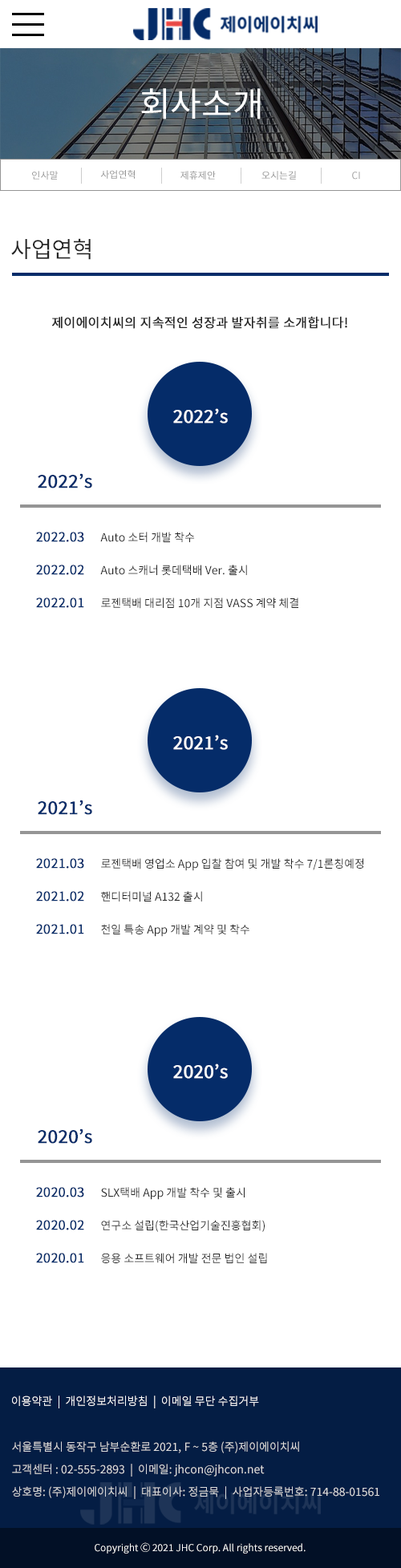
<style>
.page{position:relative;width:401px;height:1568px;background:#ffffff}
.page>*{position:absolute;margin:0}
.t1{font:33.7px "NotoSansKR-Regular";color:#ffffff}
.t2{font:9.6px "NotoSansKR-Regular";color:#959595}
.t3{font:22.5px "NotoSansKR-Regular";color:#242424}
.t4{font:12.8px "NotoSansKR-Regular";color:#242424;font-weight:bold}
.t5{font:17.6px "NotoSansKR-Regular";color:#ffffff;font-weight:bold}
.t6{font:17.6px "NotoSansKR-Regular";color:#052c69;font-weight:bold}
.t7{font:11.2px/32.9px "NotoSansKR-Regular";color:#242424}
.t8{font:12.8px/32.9px "NotoSansKR-Regular";color:#052c69;font-weight:bold}
.t9{font:11.2px "NotoSansKR-Regular";color:#ffffff}
.t10{font:11.2px/22.5px "NotoSansKR-Regular";color:#dddddd}
.t11{font:9.6px "NotoSansKR-Regular";color:#ffffff}
</style>
<div class="page">
<p class="t1" style="left:141px;top:88px;width:120px;height:32px">회사소개</p>
<p class="t2" style="left:32px;top:171px;width:26px;height:9px">인사말</p>
<p class="t2" style="left:100px;top:170px;width:35px;height:9px">사업연혁</p>
<p class="t2" style="left:180px;top:171px;width:36px;height:9px">제휴제안</p>
<p class="t2" style="left:261px;top:171px;width:35px;height:9px">오시는길</p>
<p class="t2" style="left:352px;top:172px;width:8px;height:8px">CI</p>
<p class="t3" style="left:11px;top:238px;width:80px;height:22px">사업연혁</p>
<p class="t4" style="left:52px;top:316px;width:295px;height:13px">제이에이치씨의 지속적인 성장과 발자취를 소개합니다!</p>
<p class="t5" style="left:173px;top:408px;width:55px;height:15px">2022’s</p>
<p class="t6" style="left:38px;top:473px;width:54px;height:15px">2022’s</p>
<p class="t7" style="left:36px;top:532px;width:262px;height:77px"><span class="t8">2022.03     </span>Ａuto 소터 개발 착수<br><span class="t8">2022.02     </span>Auto 스캐너 롯데택배 Ver. 출시<br><span class="t8">2022.01     </span>로젠택배 대리점 10개 지점 VASS 계약 체결</p>
<p class="t5" style="left:173px;top:735px;width:55px;height:15px">2021’s</p>
<p class="t6" style="left:38px;top:800px;width:54px;height:15px">2021’s</p>
<p class="t7" style="left:36px;top:858px;width:327px;height:79px"><span class="t8">2021.03     </span>로젠택배 영업소 App 입찰 참여 및 개발 착수 7/1론칭예정<br><span class="t8">2021.02     </span>핸디터미널 A132 출시<br><span class="t8">2021.01     </span>천일 특송 App 개발 계약 및 착수</p>
<p class="t5" style="left:173px;top:1064px;width:55px;height:15px">2020’s</p>
<p class="t6" style="left:38px;top:1128px;width:54px;height:16px">2020’s</p>
<p class="t7" style="left:36px;top:1187px;width:231px;height:77px"><span class="t8">2020.03     </span>SLX택배 App 개발 착수 및 출시<br><span class="t8">2020.02     </span>연구소 설립(한국산업기술진흥협회)<br><span class="t8">2020.01     </span>응용 소프트웨어 개발 전문 법인 설립</p>
<p class="t9" style="left:12px;top:1396px;width:247px;height:12px">이용약관  |  개인정보처리방침  |  이메일 무단 수집거부</p>
<p class="t10" style="left:12px;top:1441px;width:367px;height:58px">서울특별시 동작구 남부순환로 2021, F ~ 5층 (주)제이에이치씨<br>고객센터 : 02-555-2893  |  이메일: jhcon@jhcon.net<br>상호명: (주)제이에이치씨  |  대표이사: 정금묵  |  사업자등록번호: 714-88-01561</p>
<p class="t11" style="left:95px;top:1542px;width:211px;height:12px">Copyright Ⓒ 2021 JHC Corp. All rights reserved.</p>
</div>
